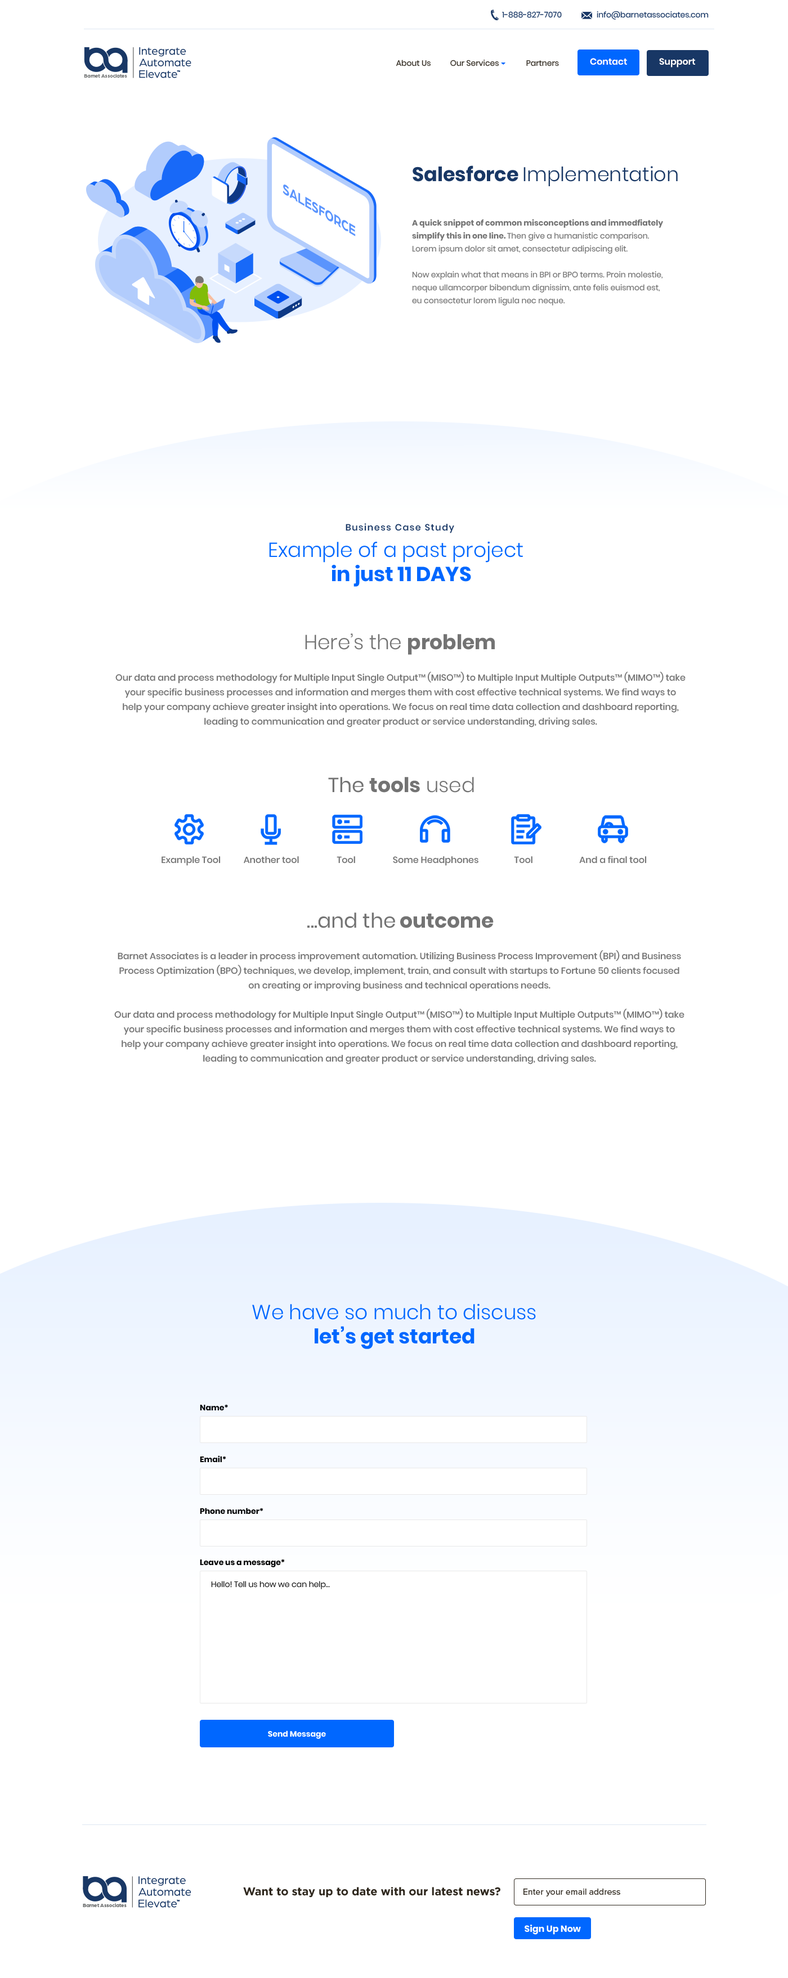
<style>
.page{position:relative;width:788px;height:1978px;background:#ffffff}
.page>*{position:absolute;margin:0}
.t1{font:7.9px "Poppins-Regular";color:#183765}
.t2{font:7.9px "Poppins-Regular";color:#2f281e}
.t3{font:9px "Poppins-SemiBold";color:#ffffff}
.t4{font:19.7px "Poppins-Light";color:#183765}
.t5{font:19.7px "Poppins-Bold";color:#183765}
.t6{font:7.9px/12.9px "Poppins-Regular";color:#737373}
.t7{font:7.9px/12.9px "Poppins-Bold";color:#737373}
.t8{font:9px "Poppins-Medium";letter-spacing:0.1em;color:#183765}
.t9{font:20.2px "Poppins-Light";color:#0067ff}
.t10{font:20.2px "Poppins-Bold";color:#0067ff}
.t11{font:20.2px "Poppins-Light";color:#737373}
.t12{font:20.2px "Poppins-Bold";color:#737373}
.t13{font:9px/14.6px "Poppins-Medium";color:#737373}
.t14{font:20.2px "Poppins-Regular";color:#737373}
.t15{font:9px "Poppins-Medium";color:#737373}
.t16{font:7.9px "Poppins-Bold";color:#000000}
.t17{font:7.9px "Poppins-Light";color:#000000}
.t18{font:7.9px "Poppins-Bold";color:#ffffff}
.t19{font:11.2px "Gotham-Bold";color:#2f281e}
.t20{font:9px "ProximaNova-Regular";color:#2f281e}
.t21{font:9px "Poppins-Bold";color:#ffffff}
</style>
<div class="page">
<p class="t1" style="left:502px;top:11px;width:59px;height:7px">1-888-827-7070</p>
<p class="t1" style="left:596px;top:11px;width:112px;height:9px">info@barnetassociates.com</p>
<p class="t2" style="left:396px;top:60px;width:163px;height:6px">About Us          Our Services              Partners</p>
<p class="t3" style="left:590px;top:58px;width:37px;height:7px">Contact</p>
<p class="t3" style="left:659px;top:58px;width:36px;height:10px">Support</p>
<p class="t4" style="left:412px;top:165px;width:265px;height:21px"><span class="t5">Salesforce </span>Implementation</p>
<p class="t6" style="left:412px;top:219px;width:251px;height:86px"><span class="t7">A quick snippet of common misconceptions and immedfiately simplify this in one line. </span>Then give a humanistic comparison. Lorem ipsum dolor sit amet, consectetur adipiscing elit. <br><br>Now explain what that means in BPI or BPO terms. Proin molestie, neque ullamcorper bibendum dignissim, ante felis euismod est, eu consectetur lorem ligula nec neque.</p>
<p class="t8" style="left:345px;top:523px;width:109px;height:10px">Business Case Study</p>
<p class="t9" style="left:269px;top:541px;width:254px;height:46px;text-align:center">Example of a past project  <span class="t10"><br>in just 11 DAYS</span></p>
<p class="t11" style="left:305px;top:633px;width:189px;height:22px">Here’s the <span class="t12">problem</span></p>
<p class="t13" style="left:115px;top:672px;width:570px;height:55px;text-align:center">Our data and process methodology for Multiple Input Single Output™ (MISO™) to Multiple Input Multiple Outputs™ (MIMO™) take your specific business processes and information and merges them with cost effective technical systems. We find ways to help your company achieve greater insight into operations. We focus on real time data collection and dashboard reporting, leading to communication and greater product or service understanding, driving sales.</p>
<p class="t12" style="left:328px;top:777px;width:146px;height:16px"><span class="t14">The </span>tools<span class="t11"> used</span></p>
<p class="t15" style="left:161px;top:856px;width:59px;height:10px">Example Tool</p>
<p class="t15" style="left:244px;top:856px;width:55px;height:7px">Another tool</p>
<p class="t15" style="left:336px;top:856px;width:19px;height:7px">Tool</p>
<p class="t15" style="left:393px;top:856px;width:85px;height:10px">Some Headphones</p>
<p class="t15" style="left:514px;top:856px;width:18px;height:7px">Tool</p>
<p class="t15" style="left:579px;top:856px;width:67px;height:7px">And a final tool</p>
<p class="t14" style="left:307px;top:912px;width:186px;height:16px">...and the<span class="t12"> outcome</span></p>
<p class="t13" style="left:114px;top:950px;width:570px;height:114px;text-align:center">Barnet Associates is a leader in process improvement automation. Utilizing Business Process Improvement (BPI) and Business Process Optimization (BPO) techniques, we develop, implement, train, and consult with startups to Fortune 50 clients focused on creating or improving business and technical operations needs.<br><br>Our data and process methodology for Multiple Input Single Output™ (MISO™) to Multiple Input Multiple Outputs™ (MIMO™) take your specific business processes and information and merges them with cost effective technical systems. We find ways to help your company achieve greater insight into operations. We focus on real time data collection and dashboard reporting, leading to communication and greater product or service understanding, driving sales.</p>
<p class="t9" style="left:252px;top:1303px;width:284px;height:46px;text-align:center">We have so much to discuss <br><span class="t10">let’s get started</span></p>
<p class="t16" style="left:200px;top:1404px;width:28px;height:6px">Name*</p>
<p class="t16" style="left:200px;top:1455px;width:26px;height:7px">Email*</p>
<p class="t16" style="left:200px;top:1508px;width:63px;height:6px">Phone number*</p>
<p class="t16" style="left:200px;top:1559px;width:85px;height:8px">Leave us a message*</p>
<p class="t17" style="left:211px;top:1581px;width:119px;height:8px">Hello! Tell us how we can help…</p>
<p class="t18" style="left:268px;top:1730px;width:58px;height:9px">Send Message</p>
<p class="t19" style="left:243px;top:1887px;width:257px;height:10px">Want to stay up to date with our latest news?</p>
<p class="t20" style="left:523px;top:1888px;width:97px;height:8px">Enter your email address</p>
<p class="t21" style="left:524px;top:1924px;width:56px;height:10px">Sign Up Now</p>
</div>
